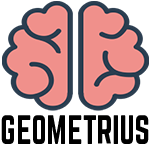
<style>
.page{position:relative;width:150px;height:150px;background:#ffffff}
.page>*{position:absolute;margin:0}
.t1{font:35.9px "Norwester-Regular";color:#000000;scale:0.85 1}
</style>
<div class="page">
<p class="t1" style="left:1px;top:115px;width:148px;height:29px">GEOMETRIUS</p>
</div>
